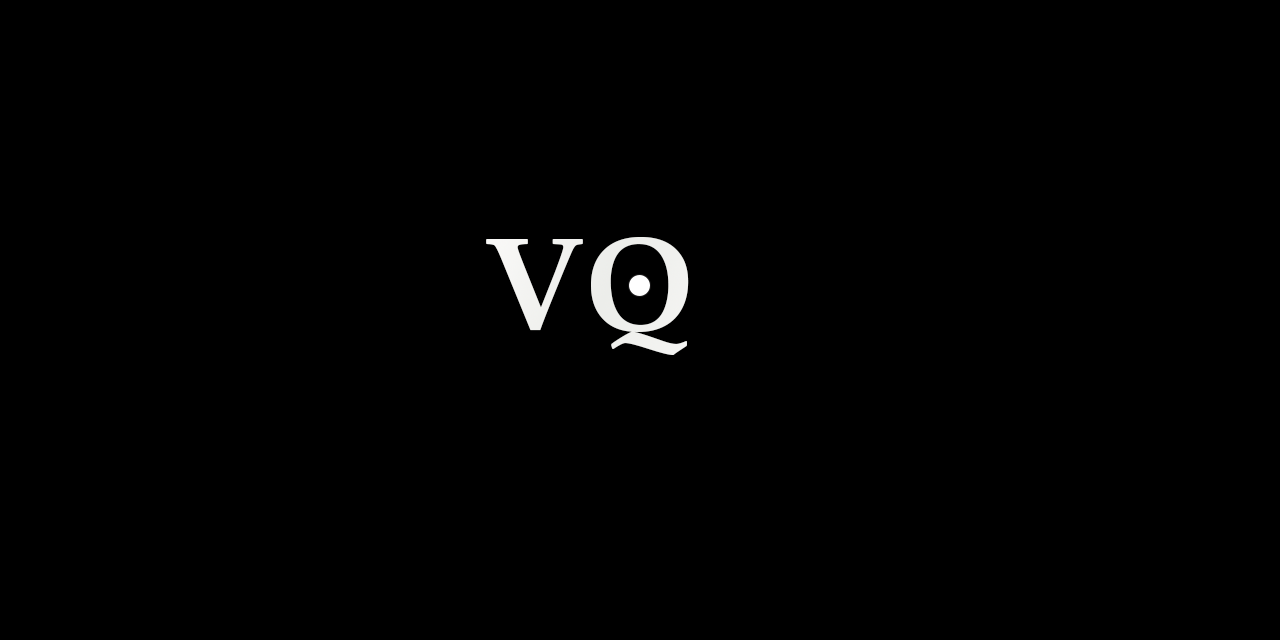
<style>
.page{position:relative;width:1280px;height:640px;background:#000000}
.page>*{position:absolute;margin:0}
.t1{font:131.4px "PalatinoLinotype-Bold";color:#ffffff}
</style>
<div class="page">
<p class="t1" style="left:486px;top:237px;width:203px;height:118px">VQ</p>
</div>
